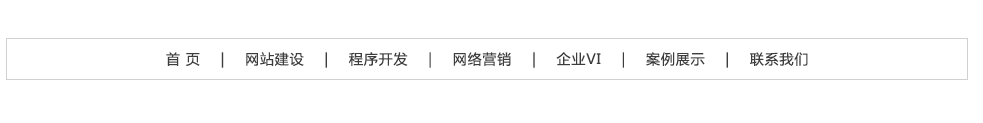
<style>
.page{position:relative;width:983px;height:123px;background:#ffffff}
.page>*{position:absolute;margin:0}
.t1{font:14px "MicrosoftYaHei";letter-spacing:0.06em;color:#3d3d3d}
</style>
<div class="page">
<p class="t1" style="left:166px;top:52px;width:642px;height:16px">首 页    |    网站建设    |    程序开发    |    网络营销    |    企业VI    |    案例展示    |    联系我们</p>
</div>
